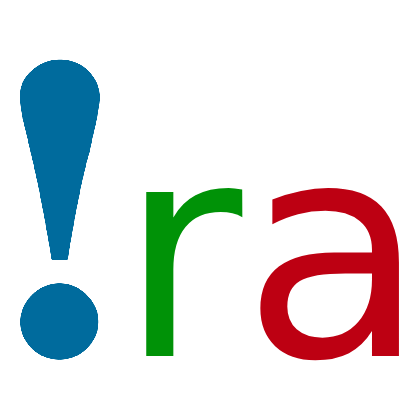
<style>
.page{position:relative;width:420px;height:420px;background:#ffffff}
.page>*{position:absolute;margin:0}
.t1{font:300px "DejaVuSans";color:#009207}
.t2{font:300px "DejaVuSans";color:#bd0012}
</style>
<div class="page">
<p class="t1" style="left:146px;top:187px;width:253px;height:174px">r<span class="t2">a</span></p>
</div>
